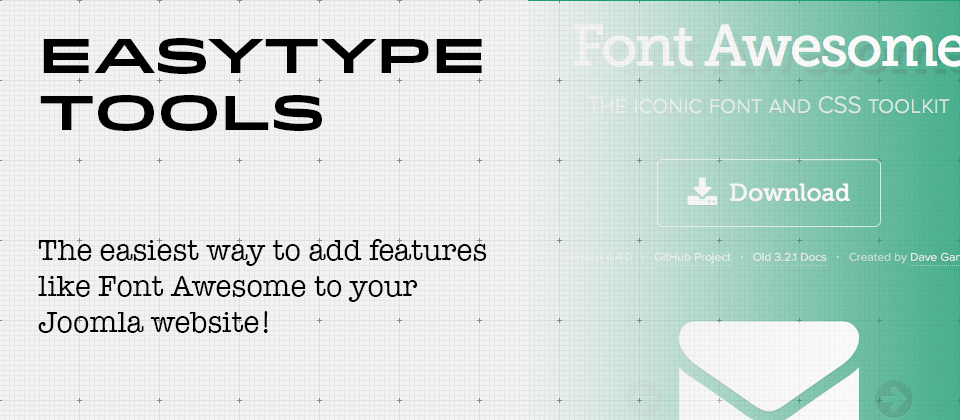
<style>
.page{position:relative;width:960px;height:420px;background:#f3f3f3}
.page>*{position:absolute;margin:0}
.t1{font:48px "Idlewild-Bold";color:#000000}
.t2{font:30px "AmericanTypewriter";color:#000000}
</style>
<div class="page">
<p class="t1" style="left:40px;top:38px;width:442px;height:93px">EasyType<br>Tools</p>
<p class="t2" style="left:38px;top:239px;width:449px;height:94px">The easiest way to add features like Font Awesome to your<br>Joomla website!</p>
</div>
